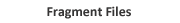
<style>
.page{position:relative;width:180px;height:23px;background:#ffffff}
.page>*{position:absolute;margin:0}
.t1{font:14px "Calibri-Bold";color:#363535}
</style>
<div class="page">
<p class="t1" style="left:47px;top:6px;width:84px;height:13px">Fragment Files</p>
</div>
